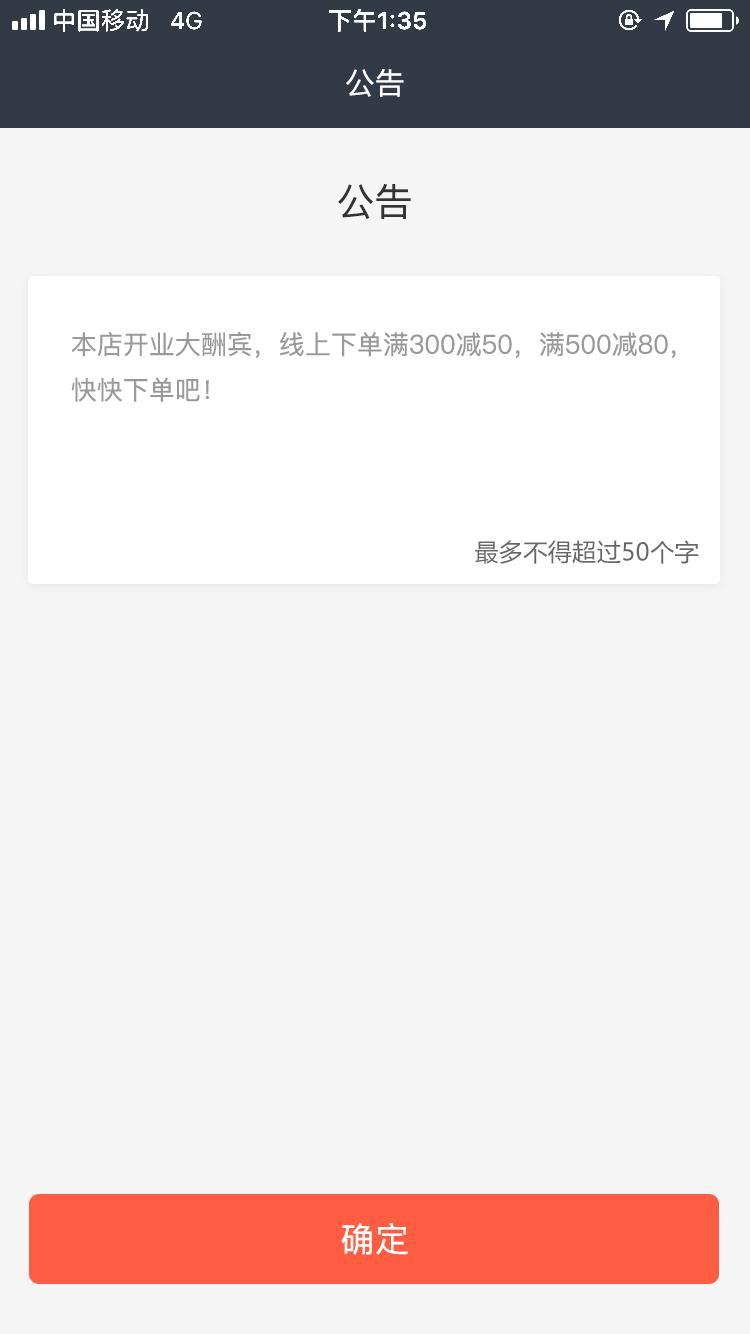
<style>
.page{position:relative;width:750px;height:1334px;background:#f5f5f5}
.page>*{position:absolute;margin:0}
.t1{font:30px "PingFang-SC-Medium";color:#ffffff}
.t2{font:38px "PingFang-SC-Medium";color:#333333}
.t3{font:26px "PingFang-SC-Medium";color:#999999}
.t4{font:24px "MicrosoftYaHeiUI";letter-spacing:0.02em;color:#666666}
.t5{font:34px "PingFang-SC-Medium";letter-spacing:0.02em;color:#ffffff}
</style>
<div class="page">
<p class="t1" style="left:346px;top:69px;width:58px;height:28px">公告</p>
<p class="t2" style="left:338px;top:184px;width:73px;height:35px">公告</p>
<p class="t3" style="left:71px;top:332px;width:605px;height:70px">本店开业大酬宾，线上下单满300减50，满500减80，<br>快快下单吧！</p>
<p class="t4" style="left:475px;top:540px;width:224px;height:24px">最多不得超过50个字</p>
<p class="t5" style="left:341px;top:1223px;width:67px;height:32px">确定</p>
</div>
